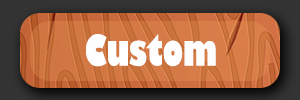
<style>
.page{position:relative;width:300px;height:100px}
.page>*{position:absolute;margin:0}
.t1{font:41.7px "GillSans-UltraBoldCondensed";color:#fefefe}
</style>
<div class="page">
<p class="t1" style="left:86px;top:34px;width:130px;height:33px">Custom</p>
</div>
